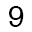
<style>
.page{position:relative;width:32px;height:32px;background:#ffffff}
.page>*{position:absolute;margin:0}
.t1{font:30px "Helvetica";color:#000000}
</style>
<div class="page">
<p class="t1" style="left:9px;top:6px;width:15px;height:21px">9</p>
</div>
